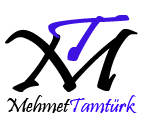
<style>
.page{position:relative;width:141px;height:120px;background:#ffffff}
.page>*{position:absolute;margin:0}
.t1{font:67.1px "Pristina-Regular";color:#3e12e0;scale:1.92 1}
.t2{font:89.4px "Pristina-Regular";color:#000000;scale:1.57 1}
.t3{font:21.1px "Pristina-Regular";color:#3600ff;scale:1.07 1}
.t4{font:21.1px "Pristina-Regular";color:#000001;scale:1.07 1}
</style>
<div class="page">
<p class="t1" style="left:48px;top:15px;width:82px;height:46px">T</p>
<p class="t2" style="left:5px;top:29px;width:133px;height:63px">M</p>
<p class="t3" style="left:7px;top:95px;width:130px;height:18px"><span class="t4">Mehmet</span>Tamtürk</p>
</div>
